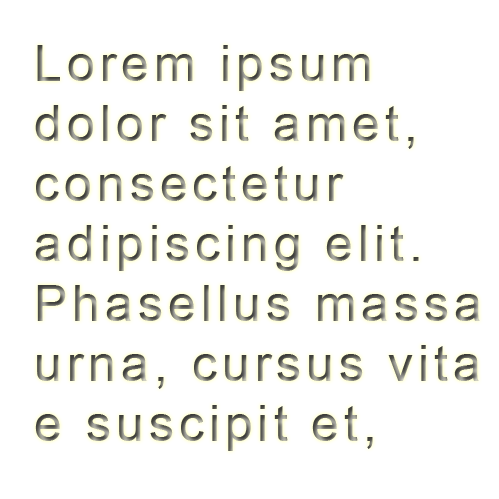
<style>
.page{position:relative;width:499px;height:499px;background:#ffffff}
.page>*{position:absolute;margin:0}
.t1{font:50px "ArialMT";letter-spacing:0.1em}
</style>
<div class="page">
<p class="t1" style="left:35px;top:45px;width:445px;height:406px">Lorem ipsum <br>dolor sit amet, <br>consectetur<br>adipiscing elit. <br>Phasellus massa <br>urna, cursus vita<br>e suscipit et,</p>
</div>
